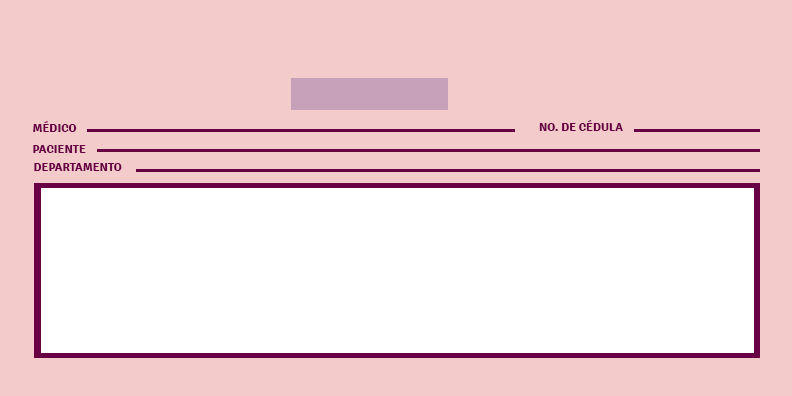
<style>
.page{position:relative;width:792px;height:396px;background:#f3cbcb}
.page>*{position:absolute;margin:0}
.t1{font:12px "Signika-Bold";color:#690045}
</style>
<div class="page">
<p class="t1" style="left:33px;top:121px;width:44px;height:11px">MÉDICO</p>
<p class="t1" style="left:539px;top:120px;width:84px;height:11px">NO. DE CÉDULA</p>
<p class="t1" style="left:33px;top:145px;width:53px;height:8px">PACIENTE</p>
<p class="t1" style="left:34px;top:163px;width:88px;height:8px">DEPARTAMENTO</p>
</div>
